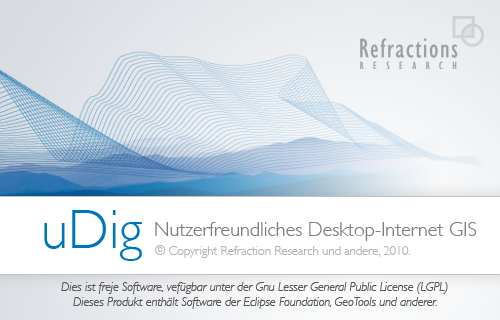
<style>
.page{position:relative;width:500px;height:320px;background:#ffffff}
.page>*{position:absolute;margin:0}
.t1{font:55px "GillSans-Light";color:#0074bc}
.t2{font:20px "GillSans-Light";color:#7f7f7f}
.t3{font:12.5px "GillSans-Light";color:#b2b2b2}
.t4{font:12.5px "GillSans-LightItalic";color:#595959}
</style>
<div class="page">
<p class="t1" style="left:44px;top:210px;width:98px;height:51px">uDig</p>
<p class="t2" style="left:155px;top:222px;width:322px;height:19px">Nutzerfreundliches Desktop-Internet GIS</p>
<p class="t3" style="left:155px;top:245px;width:255px;height:13px">© Copyright Refraction Research und andere, 2010.</p>
<p class="t4" style="left:61px;top:282px;width:387px;height:27px;text-align:center">Dies ist freje Software, vefügbar unter der Gnu Lesser General Public License (LGPL)<br>Dieses Produkt enthält Software der Eclipse Foundation, GeoTools und anderer.</p>
</div>
